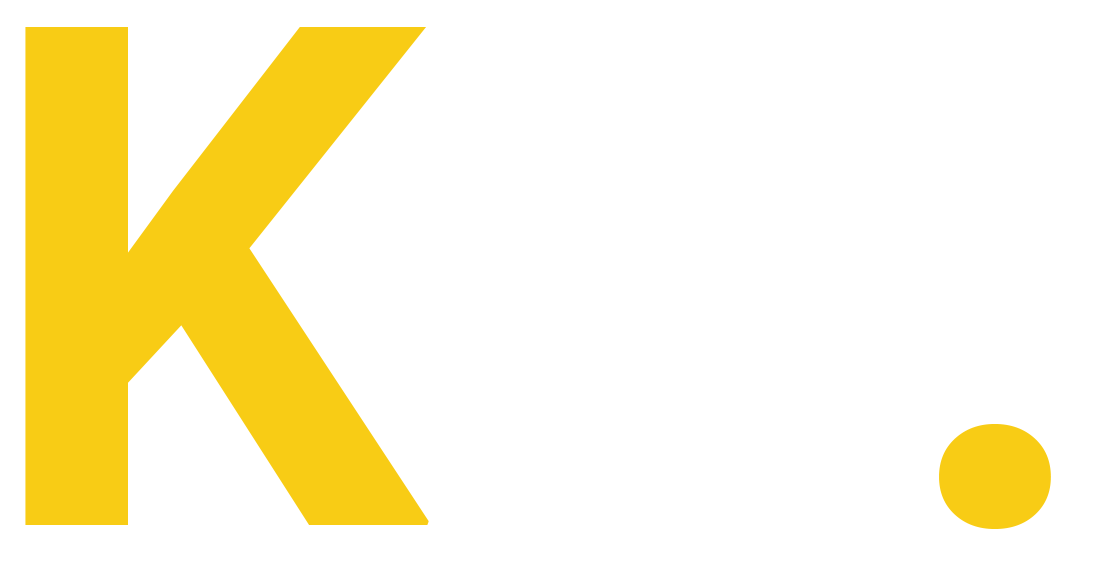
<style>
.page{position:relative;width:1104px;height:564px;background:#ffffff}
.page>*{position:absolute;margin:0}
.t1{font:700px "Roboto-Bold";color:#f8cc15}
.t2{font:700px "Roboto-Bold";color:#ffffff}
</style>
<div class="page">
<p class="t1" style="left:25px;top:27px;width:1026px;height:502px">K<span class="t2">A</span>.</p>
</div>
